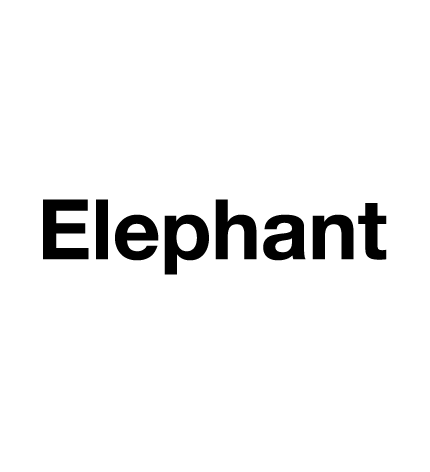
<style>
.page{position:relative;width:430px;height:472px;background:#ffffff}
.page>*{position:absolute;margin:0}
.t1{font:83.5px "HelveticaNeue-Bold";letter-spacing:-0.002em;color:#000000}
</style>
<div class="page">
<p class="t1" style="left:43px;top:199px;width:344px;height:76px">Elephant</p>
</div>
